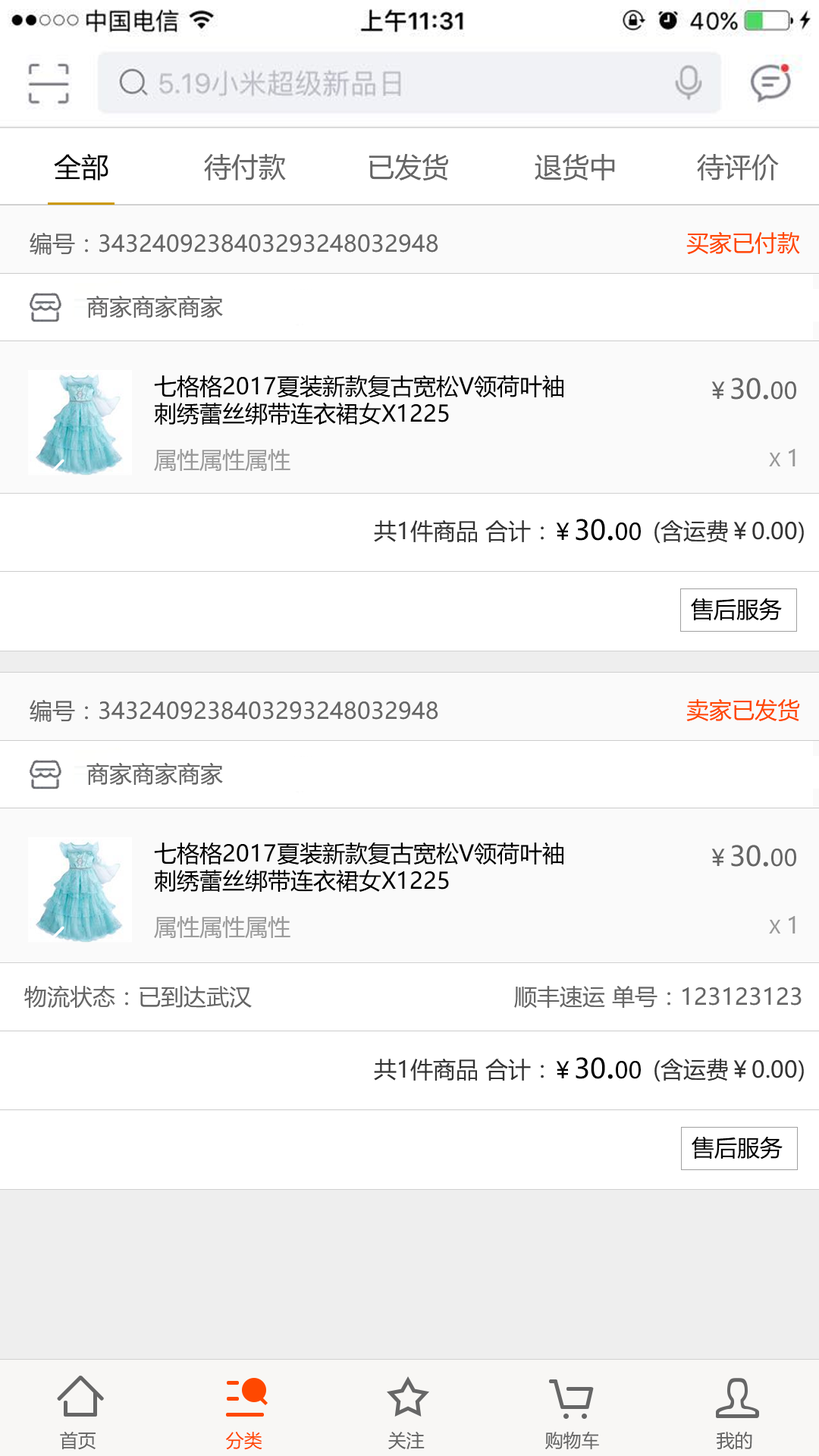
<style>
.page{position:relative;width:819px;height:1456px;background:#ffffff}
.page>*{position:absolute;margin:0}
.t1{font:27.3px "MicrosoftYaHei";color:#000000}
.t2{font:27.3px "MicrosoftYaHei";color:#666666}
.t3{font:22.7px "MicrosoftYaHei";color:#666666}
.t4{font:22.7px "MicrosoftYaHei";color:#ff4800}
.t5{font:22.7px/27.3px "MicrosoftYaHei";color:#000000}
.t6{font:36.4px "MicrosoftYaHei";color:#666666}
.t7{font:22.7px "MicrosoftYaHei";color:#999999}
.t8{font:18.2px "MicrosoftYaHei";color:#999999}
.t9{font:22.7px "MicrosoftYaHei";color:#333333}
.t10{font:22.7px "MicrosoftYaHei";color:#000000}
.t11{font:36.4px "MicrosoftYaHei";color:#000000}
.t12{font:18.2px "MicrosoftYaHei";color:#666666}
.t13{font:18.2px "MicrosoftYaHei";color:#ff4800}
</style>
<div class="page">
<p class="t1" style="left:54px;top:154px;width:54px;height:26px">全部</p>
<p class="t2" style="left:204px;top:154px;width:82px;height:26px">待付款</p>
<p class="t2" style="left:369px;top:153px;width:80px;height:27px">已发货</p>
<p class="t2" style="left:535px;top:153px;width:80px;height:27px">退货中</p>
<p class="t2" style="left:697px;top:154px;width:82px;height:26px">待评价</p>
<p class="t3" style="left:30px;top:233px;width:408px;height:22px">编号：3432409238403293248032948</p>
<p class="t4" style="left:686px;top:231px;width:114px;height:23px">买家已付款</p>
<p class="t3" style="left:86px;top:295px;width:137px;height:23px">商家商家商家</p>
<p class="t5" style="left:154px;top:375px;width:409px;height:50px">七格格2017夏装新款复古宽松V领荷叶袖刺绣蕾丝绑带连衣裙女X1225</p>
<p class="t2" style="left:711px;top:378px;width:85px;height:22px"><span class="t3">￥</span>30<span class="t6">.</span><span class="t3">00</span></p>
<p class="t7" style="left:154px;top:449px;width:136px;height:22px">属性属性属性</p>
<p class="t8" style="left:769px;top:448px;width:26px;height:18px">X <span class="t7">1</span></p>
<p class="t9" style="left:374px;top:520px;width:170px;height:23px">共1件商品 合计：</p>
<p class="t1" style="left:556px;top:519px;width:85px;height:22px"><span class="t10">￥</span>30<span class="t11">.</span><span class="t10">00</span></p>
<p class="t9" style="left:654px;top:520px;width:150px;height:24px">(含运费￥0.00)</p>
<p class="t10" style="left:691px;top:598px;width:91px;height:23px">售后服务</p>
<p class="t3" style="left:30px;top:700px;width:408px;height:22px">编号：3432409238403293248032948</p>
<p class="t4" style="left:686px;top:698px;width:114px;height:24px">卖家已发货</p>
<p class="t3" style="left:86px;top:762px;width:137px;height:23px">商家商家商家</p>
<p class="t5" style="left:154px;top:842px;width:409px;height:50px">七格格2017夏装新款复古宽松V领荷叶袖刺绣蕾丝绑带连衣裙女X1225</p>
<p class="t2" style="left:711px;top:845px;width:85px;height:22px"><span class="t3">￥</span>30<span class="t6">.</span><span class="t3">00</span></p>
<p class="t7" style="left:154px;top:916px;width:136px;height:22px">属性属性属性</p>
<p class="t8" style="left:769px;top:915px;width:26px;height:18px">X <span class="t7">1</span></p>
<p class="t3" style="left:24px;top:985px;width:228px;height:23px">物流状态：已到达武汉</p>
<p class="t3" style="left:514px;top:986px;width:288px;height:23px">顺丰速运 单号：123123123</p>
<p class="t9" style="left:374px;top:1059px;width:170px;height:22px">共1件商品 合计：</p>
<p class="t1" style="left:556px;top:1057px;width:85px;height:22px"><span class="t10">￥</span>30<span class="t11">.</span><span class="t10">00</span></p>
<p class="t9" style="left:654px;top:1059px;width:150px;height:23px">(含运费￥0.00)</p>
<p class="t10" style="left:692px;top:1136px;width:91px;height:23px">售后服务</p>
<p class="t12" style="left:60px;top:1432px;width:36px;height:18px">首页</p>
<p class="t13" style="left:226px;top:1432px;width:36px;height:18px">分类</p>
<p class="t12" style="left:388px;top:1432px;width:37px;height:17px">关注</p>
<p class="t12" style="left:545px;top:1432px;width:54px;height:18px">购物车</p>
<p class="t12" style="left:717px;top:1432px;width:35px;height:17px">我的</p>
</div>
